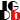
<style>
.page{position:relative;width:20px;height:20px;background:#ffffff}
.page>*{position:absolute;margin:0}
.t1{font:15px "Broadway";color:#000000}
.t2{font:15px "Broadway";color:#ff0000}
</style>
<div class="page">
<p class="t1" style="left:2px;top:1px;width:17px;height:10px">IG</p>
<p class="t1" style="left:0px;top:10px;width:21px;height:10px">D<span class="t2">b</span></p>
</div>
